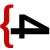
<style>
.page{position:relative;width:50px;height:50px;background:#ffffff}
.page>*{position:absolute;margin:0}
.t1{font:48px "HelveticaNeue-MediumCond";color:#c80505;text-transform:uppercase}
.t2{font:54px "HelveticaNeue-MediumCond";color:#000000;text-transform:uppercase}
</style>
<div class="page">
<p class="t1" style="left:0px;top:4px;width:14px;height:44px">{</p>
<p class="t2" style="left:10px;top:14px;width:40px;height:25px;rotate:90deg">4</p>
</div>
